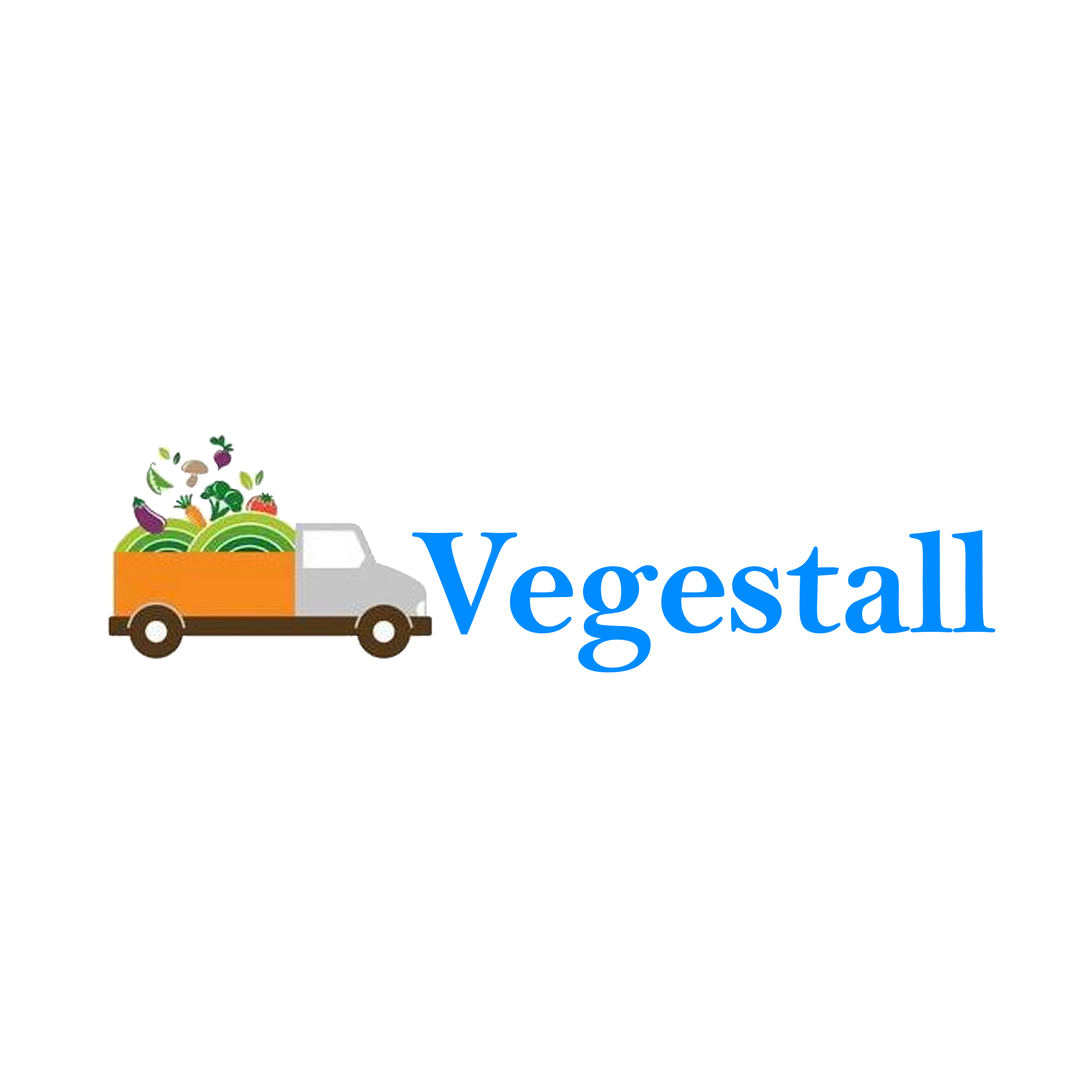
<style>
.page{position:relative;width:1092px;height:1092px;background:#ffffff}
.page>*{position:absolute;margin:0}
.t1{font:152.7px "BellMTBold";letter-spacing:-0.025em;color:#008cff}
</style>
<div class="page">
<p class="t1" style="left:412px;top:530px;width:584px;height:142px">Vegestall</p>
</div>
